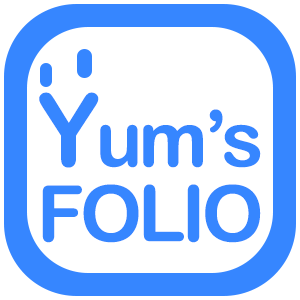
<style>
.page{position:relative;width:300px;height:300px;background:#ffffff}
.page>*{position:absolute;margin:0}
.t1{font:77.8px/75px "ArialRoundedMTBold";letter-spacing:-0.05em;color:#3686ff}
.t2{font:100.9px/75px "ArialRoundedMTBold";letter-spacing:-0.05em;color:#3686ff}
</style>
<div class="page">
<p class="t1" style="left:39px;top:92px;width:222px;height:151px;text-align:center"><span class="t2">Y</span>um’s<br>FOLIO</p>
</div>
